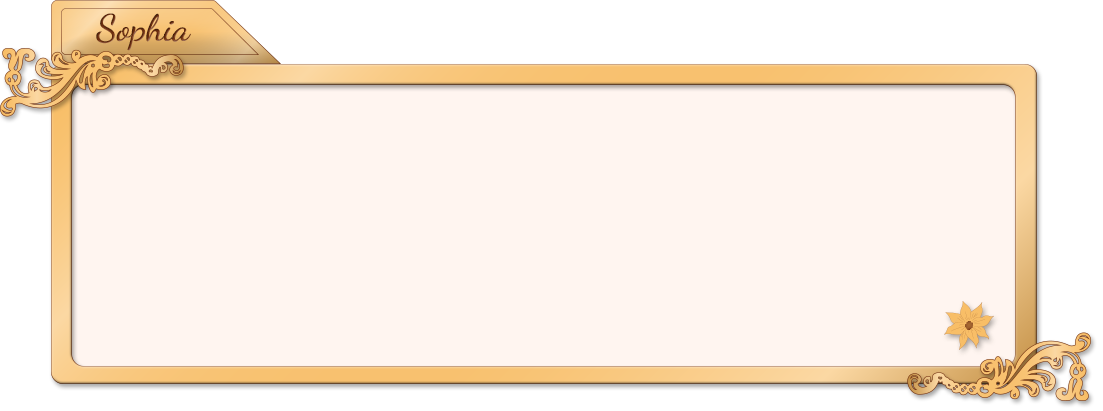
<style>
.page{position:relative;width:1103px;height:411px;background:#fff5f0}
.page>*{position:absolute;margin:0}
.t1{font:36.9px "DancingScript-Bold";color:#713010}
</style>
<div class="page">
<p class="t1" style="left:96px;top:13px;width:95px;height:38px">Sophia</p>
</div>
